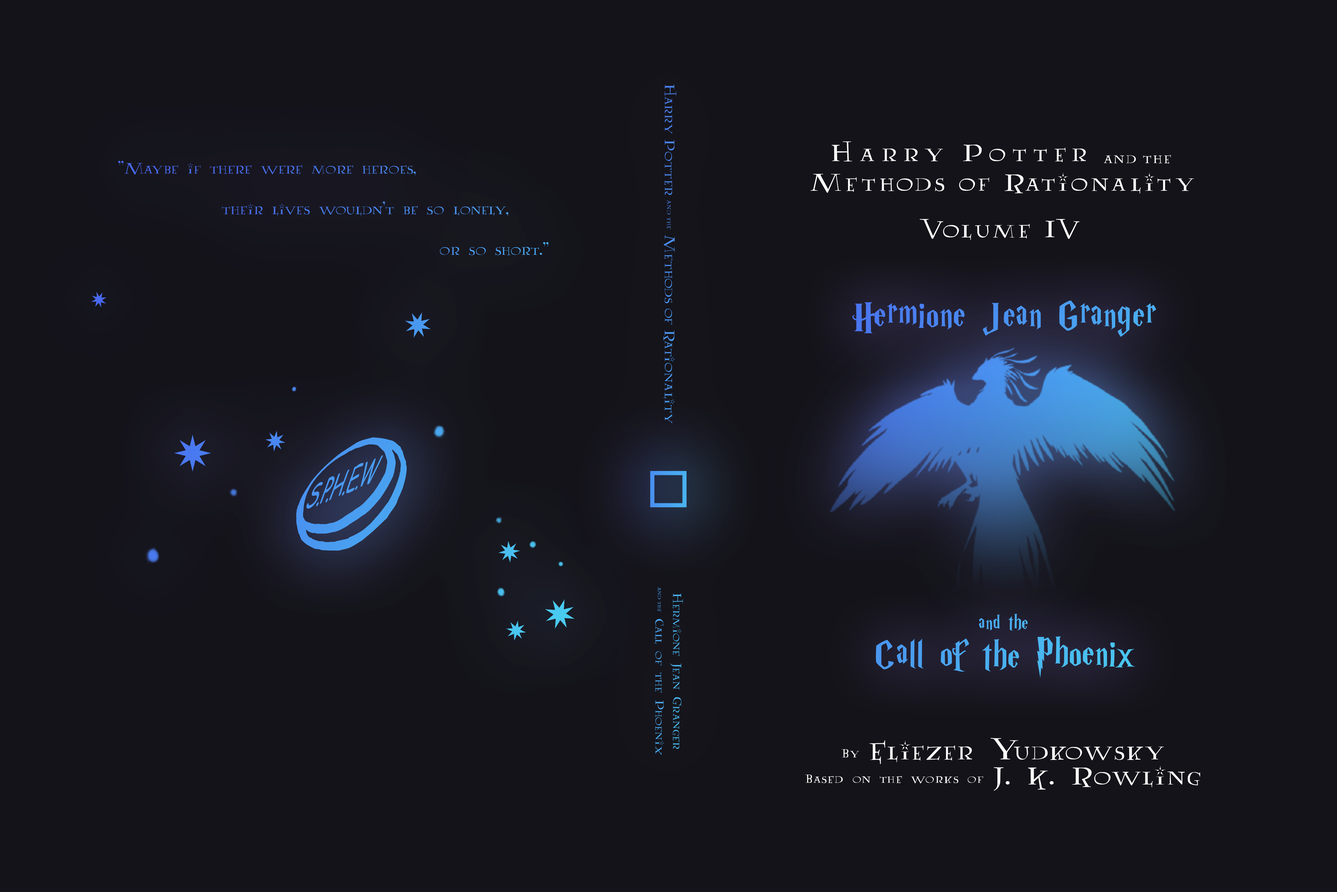
<style>
.page{position:relative;width:1337px;height:892px;background:#141319}
.page>*{position:absolute;margin:0}
.t1{font:15.9px "Lumos";color:#498ff0}
.t2{font:8px "Lumos";color:#498ff0}
.t3{font:27.4px/29.7px "Lumos";letter-spacing:0.1em;color:#ffffff}
.t4{font:27.4px/19.4px "Lumos";letter-spacing:0.2em;color:#ffffff}
.t5{font:16.9px/19.4px "Lumos";letter-spacing:0.05em;color:#ffffff}
.t6{font:16.9px "AA-Lumos-Caps";color:#497df0}
.t7{font:27.4px "Lumos";letter-spacing:0.1em;color:#ffffff}
.t8{font:42.3px "HarryP";letter-spacing:0.025em}
.t9{font:36.2px "ComicSansMS";letter-spacing:-0.05em;color:#4998f0;scale:0.54 1}
.t10{font:13.5px/17.6px "AA-Lumos-Caps";color:#49b2f0}
.t11{font:6.8px/13.3px "Lumos";color:#49b2f0}
.t12{font:22.6px "HarryP";letter-spacing:0.025em;color:#49adf0}
.t13{font:42.3px "HarryP";letter-spacing:0.025em;color:#49b1f0}
.t14{font:14.1px/25.1px "AA-Lumos-Caps";letter-spacing:0.05em;color:#ffffff}
.t15{font:28.2px/25.1px "AA-Lumos-Caps";letter-spacing:0.05em;color:#ffffff}
</style>
<div class="page">
<p class="t1" style="left:663px;top:84px;width:13px;height:340px;rotate:90deg">Harry Potter <span class="t2">and the </span>Methods of Rationality</p>
<p class="t3" style="left:810px;top:141px;width:384px;height:53px;text-align:center"><span class="t4">Harry Potter</span><span class="t5">  and the<br></span>Methods of Rationality</p>
<p class="t6" style="left:118px;top:161px;width:431px;height:94px">"Maybe if there were more heroes, <br>      <br>            their lives wouldn't be so lonely, <br>                             <br>                                     or so short."</p>
<p class="t7" style="left:920px;top:219px;width:160px;height:21px">Volume IV</p>
<p class="t8" style="left:852px;top:301px;width:304px;height:36px">Hermione Jean Granger</p>
<p class="t9" style="left:306px;top:455px;width:77px;height:54px;rotate:-23deg">S.P.H.E.W</p>
<p class="t10" style="left:654px;top:587px;width:29px;height:168px;text-align:center;rotate:90deg">Hermione Jean Granger<br><span class="t11">and the   </span>Call of the Phoenix</p>
<p class="t12" style="left:979px;top:614px;width:49px;height:17px">and the</p>
<p class="t13" style="left:876px;top:636px;width:259px;height:42px">Call of the Phoenix</p>
<p class="t14" style="left:805px;top:738px;width:395px;height:53px;text-align:center">By <span class="t15">Eliezer Yudkowsky<br></span>Based on the works of <span class="t15">J. K. Rowling</span></p>
</div>
